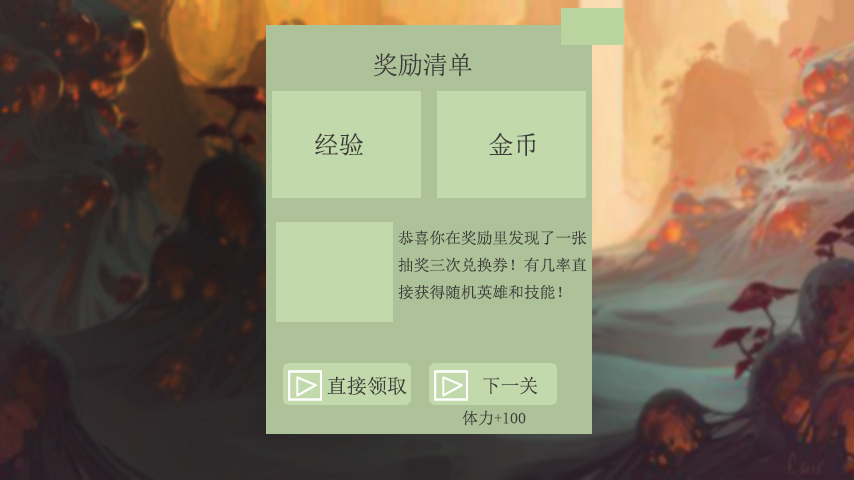
<style>
.page{position:relative;width:854px;height:480px}
.page>*{position:absolute;margin:0}
.t1{font:25px "SimSun";color:#3b3b3a}
.t2{font:15.5px "SimSun";color:#3b3b3a}
.t3{font:20.1px "SimSun";color:#3b3b3a}
.t4{font:19px "SimSun";color:#3b3b3a}
.t5{font:16px "SimSun";color:#3b3b3a}
</style>
<div class="page">
<p class="t1" style="left:373px;top:53px;width:99px;height:24px">奖励清单</p>
<p class="t1" style="left:315px;top:133px;width:48px;height:23px">经验</p>
<p class="t1" style="left:489px;top:132px;width:47px;height:25px">金币</p>
<p class="t2" style="left:398px;top:230px;width:189px;height:70px">恭喜你在奖励里发现了一张<br>抽奖三次兑换券！有几率直<br>接获得随机英雄和技能！</p>
<p class="t3" style="left:327px;top:376px;width:80px;height:20px">直接领取</p>
<p class="t4" style="left:483px;top:376px;width:55px;height:19px">下一关</p>
<p class="t5" style="left:462px;top:410px;width:64px;height:16px">体力+100</p>
</div>
